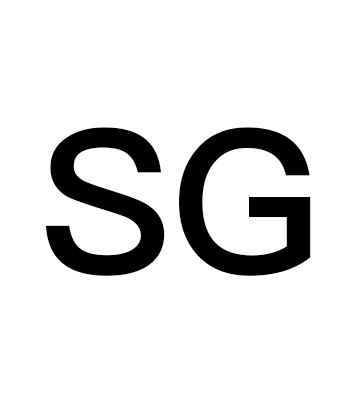
<style>
.page{position:relative;width:357px;height:403px;background:#ffffff}
.page>*{position:absolute;margin:0}
.t1{font:200px "PingFang-SC-Heavy";color:#000000}
</style>
<div class="page">
<p class="t1" style="left:46px;top:127px;width:265px;height:149px">SG</p>
</div>
